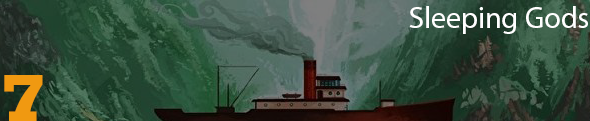
<style>
.page{position:relative;width:590px;height:121px}
.page>*{position:absolute;margin:0}
.t1{font:30px "MyriadPro-Regular";color:#ffffff}
.t2{font:70px "Rockwell-ExtraBold";color:#f09911}
</style>
<div class="page">
<p class="t1" style="left:409px;top:6px;width:179px;height:28px">Sleeping Gods</p>
<p class="t2" style="left:4px;top:75px;width:39px;height:47px">7</p>
</div>
